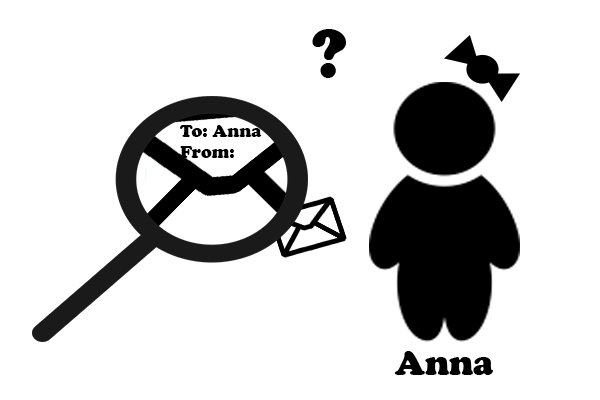
<style>
.page{position:relative;width:600px;height:400px;background:#ffffff}
.page>*{position:absolute;margin:0}
.t1{font:72px "CooperBlack";color:#000000}
.t2{font:18px "CooperBlack";color:#000000}
.t3{font:36px "CooperBlack";color:#000000}
</style>
<div class="page">
<p class="t1" style="left:312px;top:29px;width:34px;height:49px">?</p>
<p class="t2" style="left:180px;top:125px;width:82px;height:33px;text-align:center">To: Anna<br>From:</p>
<p class="t3" style="left:395px;top:351px;width:98px;height:24px">Anna</p>
</div>
